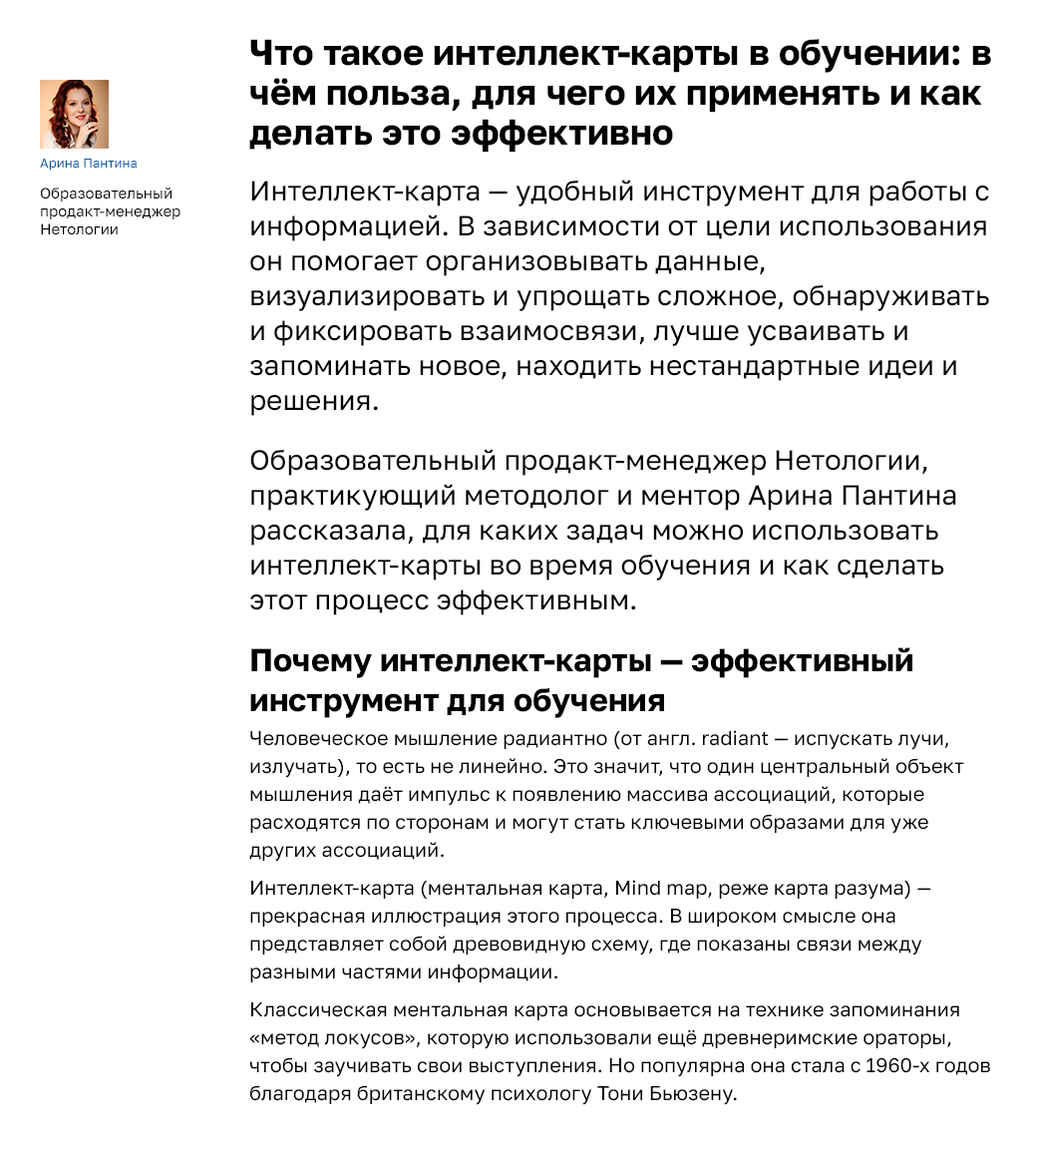
<style>
.page{position:relative;width:1037px;height:1150px;background:#ffffff}
.page>*{position:absolute;margin:0}
.t1{font:35.9px/39.9px "GolosText-Bold";color:#000000}
.t2{font:13px "GolosText-Regular";color:#015cab}
.t3{font:27.9px/34.9px "GolosText-Regular";color:#000000}
.t4{font:15px/17.9px "GolosText-Regular";color:#000000}
.t5{font:31.9px/39.9px "GolosText-Bold";color:#000000}
.t6{font:19.9px/27.9px "GolosText-Regular";color:#000000}
</style>
<div class="page">
<p class="t1" style="left:249px;top:39px;width:742px;height:114px">Что такое интеллект-карты в обучении: в чём польза, для чего их применять и как делать это эффективно</p>
<p class="t2" style="left:40px;top:159px;width:97px;height:12px">Арина Пантина</p>
<p class="t3" style="left:250px;top:179px;width:739px;height:436px">Интеллект-карта — удобный инструмент для работы с информацией. В зависимости от цели использования он помогает организовывать данные, визуализировать и упрощать сложное, обнаруживать и фиксировать взаимосвязи, лучше усваивать и запоминать новое, находить нестандартные идеи и решения.<br>Образовательный продакт-менеджер Нетологии, практикующий методолог и ментор Арина Пантина рассказала, для каких задач можно использовать интеллект-карты во время обучения и как сделать этот процесс эффективным.</p>
<p class="t4" style="left:41px;top:187px;width:139px;height:48px">Образовательный продакт-менеджер Нетологии</p>
<p class="t5" style="left:250px;top:647px;width:662px;height:71px">Почему интеллект-карты — эффективный инструмент для обучения</p>
<p class="t6" style="left:249px;top:730px;width:741px;height:375px">Человеческое мышление радиантно (от англ. radiant — испускать лучи, излучать), то есть не линейно. Это значит, что один центральный объект мышления даёт импульс к появлению массива ассоциаций, которые расходятся по сторонам и могут стать ключевыми образами для уже других ассоциаций.<br>Интеллект-карта (ментальная карта, Mind map, реже карта разума) — прекрасная иллюстрация этого процесса. В широком смысле она представляет собой древовидную схему, где показаны связи между разными частями информации.<br>Классическая ментальная карта основывается на технике запоминания «метод локусов», которую использовали ещё древнеримские ораторы, чтобы заучивать свои выступления. Но популярна она стала с 1960-х годов благодаря британскому психологу Тони Бьюзену.</p>
</div>
